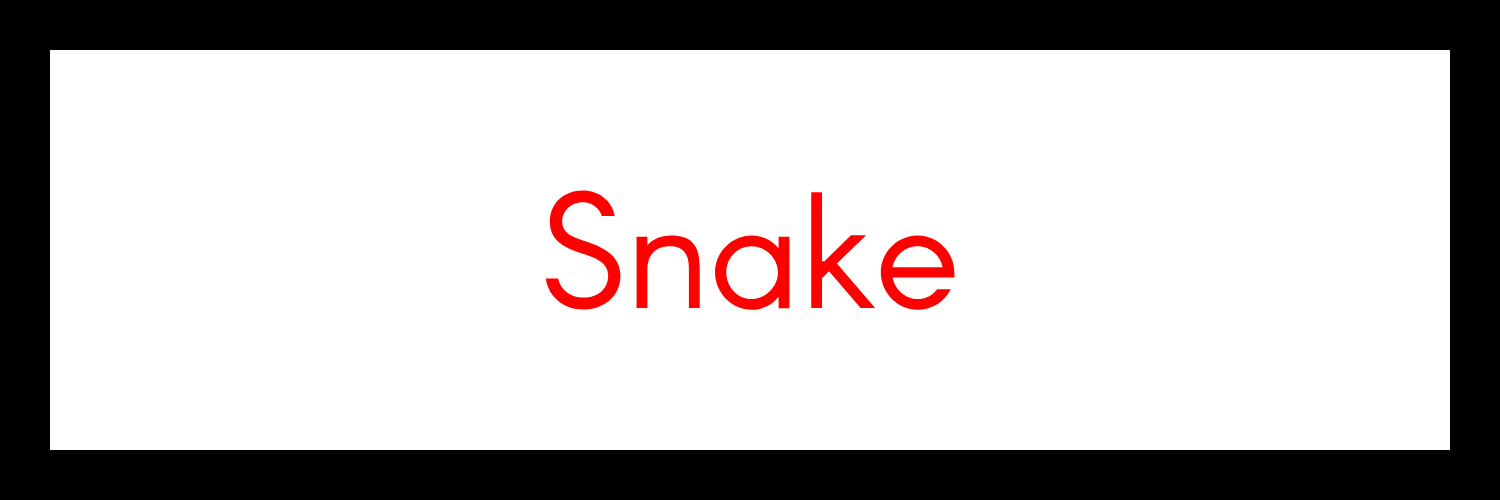
<style>
.page{position:relative;width:1500px;height:500px;background:#ffffff}
.page>*{position:absolute;margin:0}
.t1{font:162.2px "Arcon-Regular";color:#ff0000}
</style>
<div class="page">
<p class="t1" style="left:545px;top:190px;width:410px;height:120px">Snake</p>
</div>
